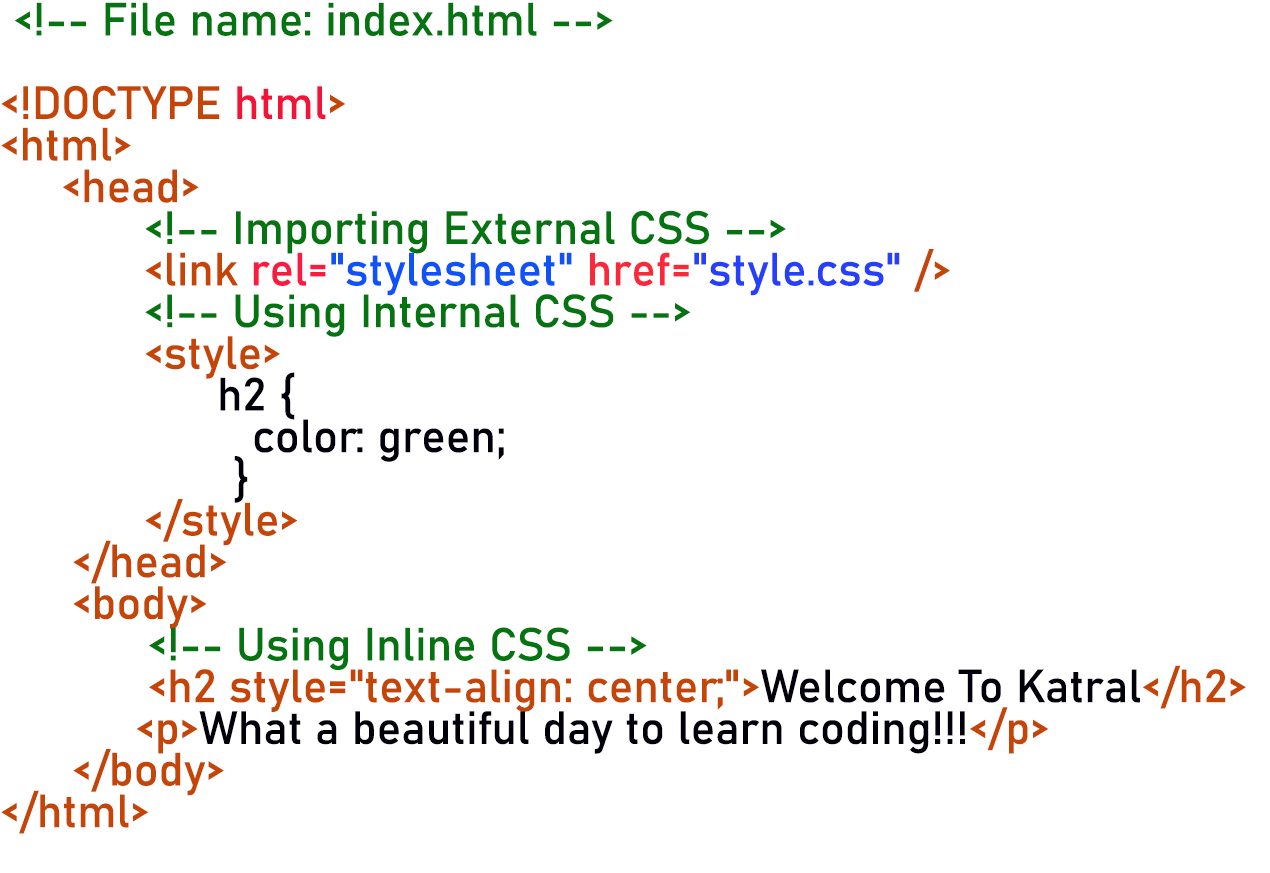
<style>
.page{position:relative;width:1270px;height:873px;background:#ffffff}
.page>*{position:absolute;margin:0}
.t1{font:45.8px/41.7px "Bahnschrift";color:#01000a}
.t2{font:50px/41.7px "Bahnschrift";color:#01000a}
.t3{font:45.8px/41.7px "Bahnschrift";color:#037410}
.t4{font:45.8px/41.7px "Bahnschrift";color:#c54506}
.t5{font:45.8px/41.7px "Bahnschrift";color:#f41338}
.t6{font:45.8px/41.7px "Bahnschrift";color:#f91b40}
.t7{font:45.8px/41.7px "Bahnschrift";color:#1052f9}
.t8{font:45.8px/41.7px "Bahnschrift";color:#fb283c}
.t9{font:45.8px/41.7px "Bahnschrift";color:#263ffb}
</style>
<div class="page">
<p class="t1" style="left:1px;top:2px;width:1245px;height:832px"><span class="t2"> </span><span class="t3">&lt;!-- File name: index.html --&gt;<br>         <br></span><span class="t4">&lt;!DOCTYPE </span><span class="t5">html</span><span class="t4">&gt;<br>&lt;html&gt;<br>     &lt;head&gt;<br>    </span><span class="t3">&lt;!-- Importing External CSS --&gt;<br>    </span><span class="t4">&lt;link </span><span class="t6">rel=</span><span class="t7">"stylesheet" </span><span class="t8">href=</span><span class="t9">"style.css"</span><span class="t4"> /&gt; <br>     </span><span class="t3">&lt;!-- Using Internal CSS --&gt;<br>    </span><span class="t4">&lt;style&gt;<br></span>          h2 {<br>             color: green;<br>                   }<br>    <span class="t4">&lt;/style&gt;<br>  &lt;/head&gt;<br>  &lt;body&gt;<br>            </span><span class="t3">&lt;!-- Using Inline CSS --&gt;<br>            </span><span class="t4">&lt;h2 style="text-align: center;"&gt;</span>Welcome To Katral<span class="t4">&lt;/h2&gt;<br>           &lt;p&gt;</span>What a beautiful day to learn coding!!!<span class="t4">&lt;/p&gt;<br>  &lt;/body&gt;<br>&lt;/html&gt;</span></p>
</div>
